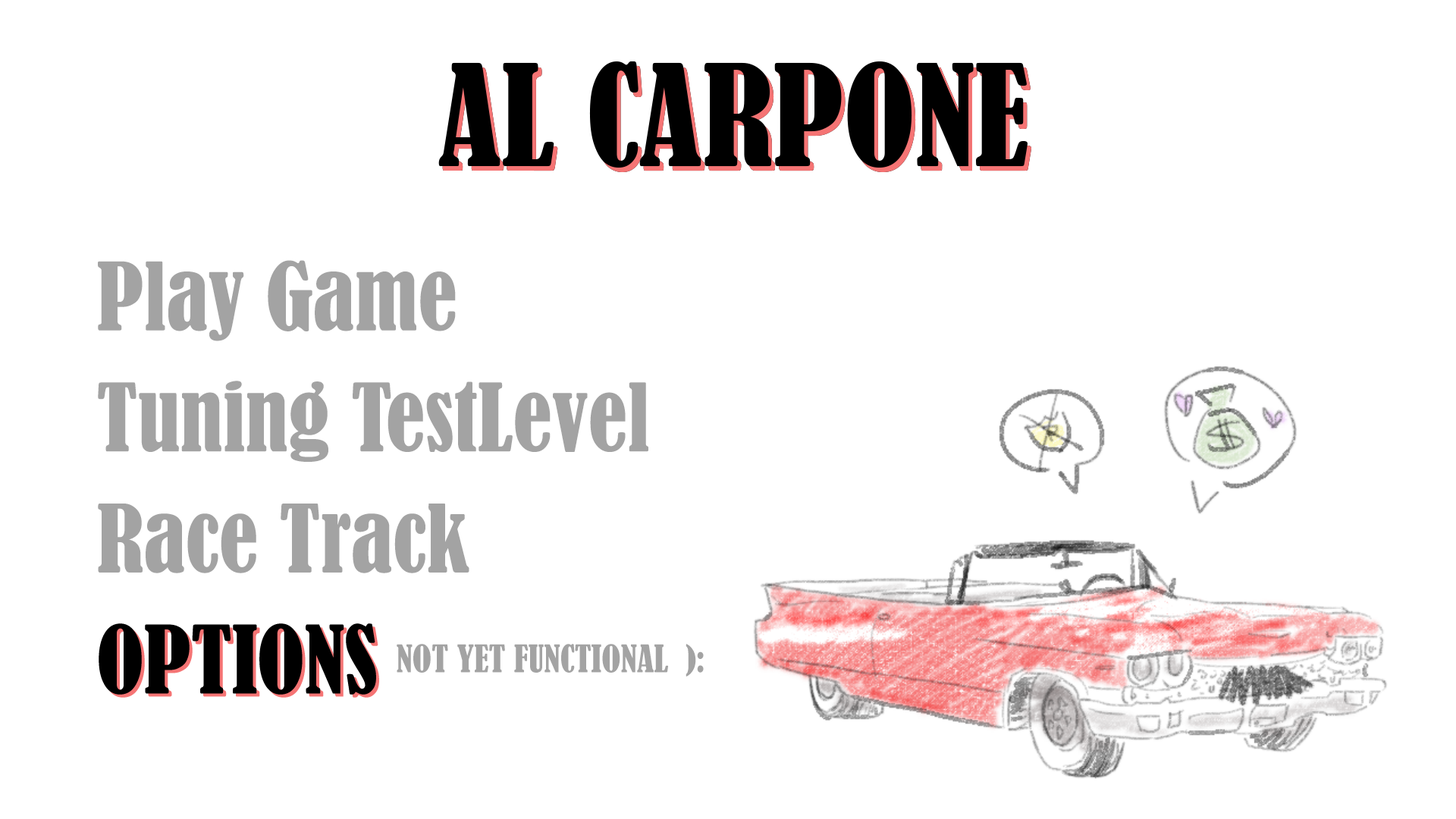
<style>
.page{position:relative;width:1456px;height:819px;background:#ffffff}
.page>*{position:absolute;margin:0}
.t1{font:87.1px "BernardMT-Condensed";color:#a3a3a3}
.t2{font:35.2px "BernardMT-Condensed";color:#a3a3a3}
</style>
<div class="page">
<p class="t1" style="left:98px;top:260px;width:358px;height:81px">Play Game</p>
<p class="t1" style="left:98px;top:381px;width:550px;height:81px">Tuning TestLevel</p>
<p class="t1" style="left:98px;top:504px;width:371px;height:69px">Race Track</p>
<p class="t2" style="left:397px;top:644px;width:307px;height:32px">:(  NOT YET FUNCTIONAL</p>
</div>
